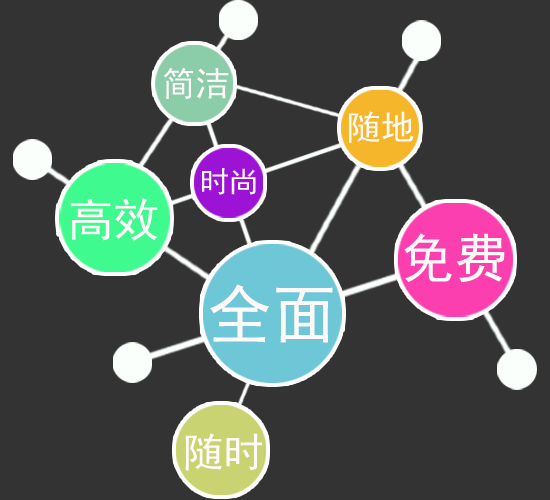
<style>
.page{position:relative;width:550px;height:500px;background:#333333}
.page>*{position:absolute;margin:0}
.t1{font:34px "SimHei";color:#fff9f9}
.t2{font:29.2px "SimHei";color:#fff9f9}
.t3{font:45.6px "SimHei";color:#fff9f9}
.t4{font:53.1px "SimHei";color:#fff9f9}
.t5{font:65px "SimHei";color:#fff9f9}
.t6{font:40.1px "SimHei";color:#fff9f9}
</style>
<div class="page">
<p class="t1" style="left:163px;top:67px;width:66px;height:32px">简洁</p>
<p class="t1" style="left:349px;top:111px;width:65px;height:32px">随地</p>
<p class="t2" style="left:202px;top:168px;width:54px;height:27px">时尚</p>
<p class="t3" style="left:70px;top:198px;width:88px;height:43px">高效</p>
<p class="t4" style="left:404px;top:233px;width:101px;height:50px">免费</p>
<p class="t5" style="left:210px;top:284px;width:123px;height:59px">全面</p>
<p class="t6" style="left:185px;top:433px;width:77px;height:38px">随时</p>
</div>
